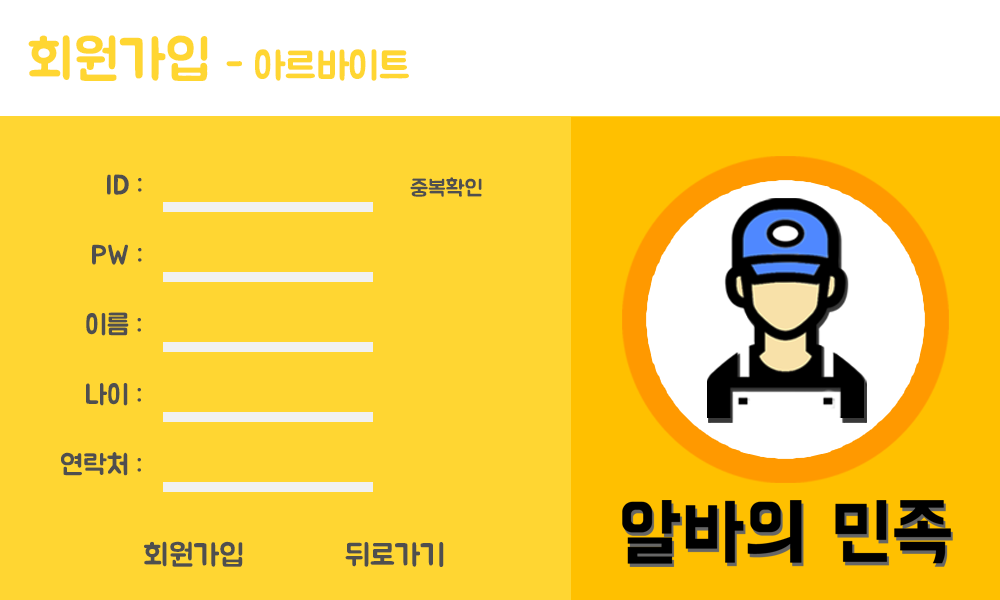
<style>
.page{position:relative;width:1000px;height:600px;background:#ffd632}
.page>*{position:absolute;margin:0}
.t1{font:55.6px "BMJUA";color:#ffd632}
.t2{font:38.9px "BMJUA";color:#ffd632}
.t3{font:27.8px "BMJUA";color:#4f4f4f}
.t4{font:22.2px "BMJUA";color:#4f4f4f}
.t5{font:30.6px "BMJUA";color:#4f4f4f}
</style>
<div class="page">
<p class="t1" style="left:28px;top:35px;width:180px;height:46px">회원가입</p>
<p class="t2" style="left:226px;top:49px;width:183px;height:32px">- 아르바이트</p>
<p class="t3" style="left:107px;top:174px;width:35px;height:21px">ID :</p>
<p class="t4" style="left:410px;top:177px;width:72px;height:20px">중복확인</p>
<p class="t3" style="left:92px;top:244px;width:50px;height:21px">PW :</p>
<p class="t3" style="left:86px;top:312px;width:55px;height:24px">이름 :</p>
<p class="t3" style="left:86px;top:383px;width:55px;height:23px">나이 :</p>
<p class="t3" style="left:61px;top:452px;width:80px;height:24px">연락처 :</p>
<p class="t5" style="left:144px;top:541px;width:99px;height:26px">회원가입</p>
<p class="t5" style="left:345px;top:542px;width:99px;height:25px">뒤로가기</p>
</div>
